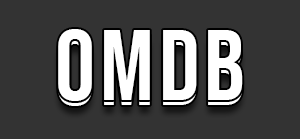
<style>
.page{position:relative;width:300px;height:139px;background:#333333}
.page>*{position:absolute;margin:0}
.t1{font:100px "BebasNeue-Regular";letter-spacing:0.05em;color:#ffffff}
</style>
<div class="page">
<p class="t1" style="left:58px;top:29px;width:185px;height:72px">OMDB</p>
<p class="t1" style="left:58px;top:34px;width:185px;height:72px">OMDB</p>
</div>
